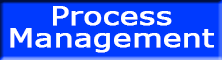
<style>
.page{position:relative;width:222px;height:60px;background:#003afe}
.page>*{position:absolute;margin:0}
.t1{font:24.5px/22px "Verdana";color:#ffffff;font-weight:bold;scale:1.25 1}
</style>
<div class="page">
<p class="t1" style="left:10px;top:6px;width:204px;height:47px;text-align:center">Process<br>Management</p>
</div>
